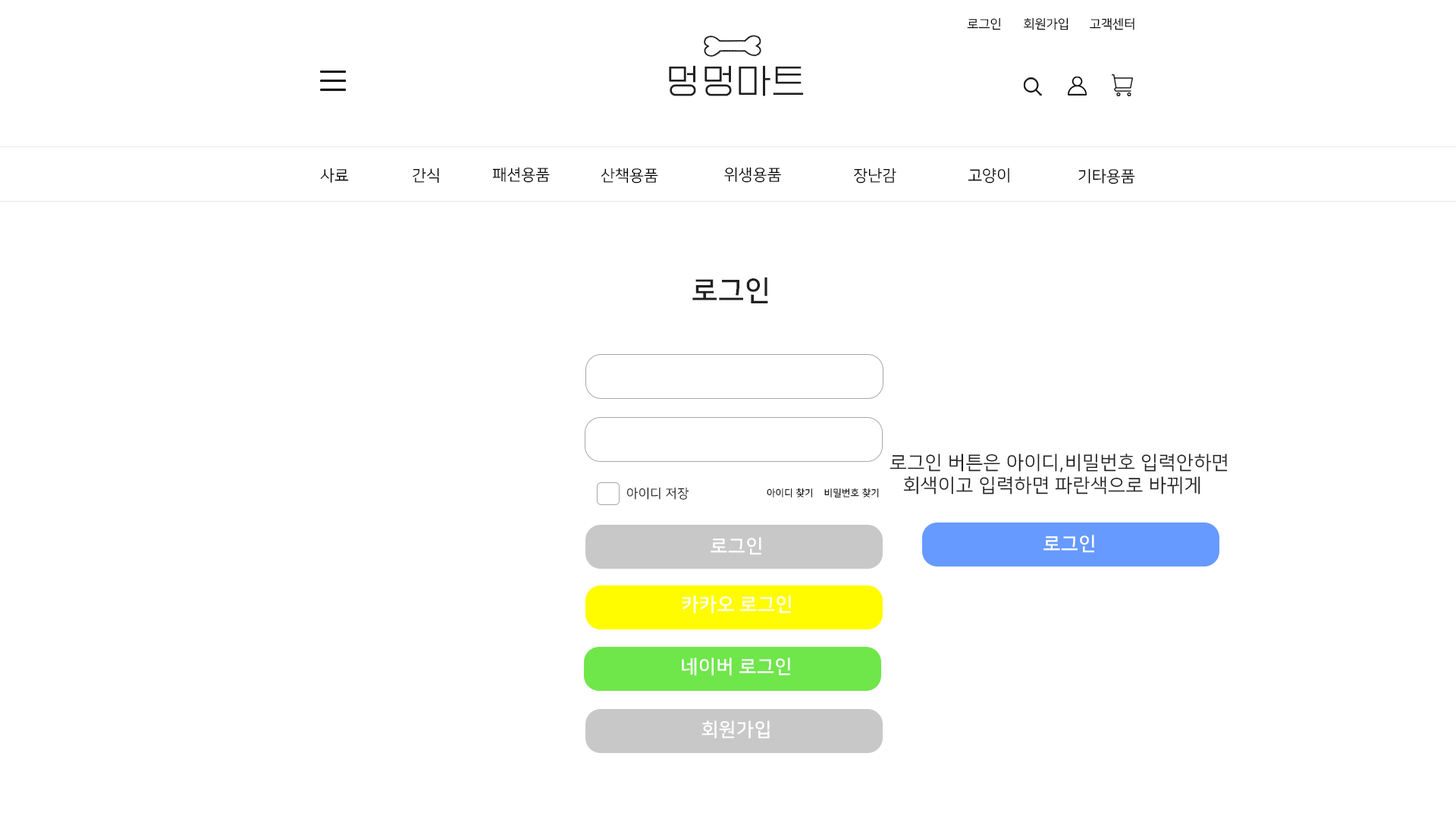
<style>
.page{position:relative;width:1456px;height:819px;background:#ffffff}
.page>*{position:absolute;margin:0}
.t1{font:12.6px "NanumSquareR";color:#000000}
.t2{font:34.8px "EF_watermelonSalad";letter-spacing:0.025em;color:#202020}
.t3{font:15.8px "NanumSquareR";color:#000000}
.t4{font:28.4px "NanumSquareB";letter-spacing:0.025em;color:#202020}
.t5{font:19px "NanumSquareR";letter-spacing:0.025em;color:#202020}
.t6{font:12.6px "NanumSquareR";letter-spacing:0.025em;color:#202020}
.t7{font:9.5px "NanumSquareR";letter-spacing:0.025em;color:#000000}
.t8{font:9.5px "NanumSquareR";letter-spacing:0.025em}
.t9{font:19px "NanumSquareB";letter-spacing:0.025em;color:#ffffff}
</style>
<div class="page">
<p class="t1" style="left:967px;top:17px;width:34px;height:13px">로그인</p>
<p class="t1" style="left:1024px;top:17px;width:44px;height:13px">회원가입</p>
<p class="t1" style="left:1090px;top:17px;width:44px;height:13px">고객센터</p>
<p class="t2" style="left:669px;top:65px;width:134px;height:31px">멍멍마트</p>
<p class="t3" style="left:320px;top:168px;width:29px;height:15px">사료</p>
<p class="t3" style="left:413px;top:168px;width:26px;height:16px">간식</p>
<p class="t3" style="left:492px;top:167px;width:58px;height:16px">패션용품</p>
<p class="t3" style="left:601px;top:168px;width:57px;height:16px">산책용품</p>
<p class="t3" style="left:724px;top:167px;width:57px;height:16px">위생용품</p>
<p class="t3" style="left:854px;top:168px;width:42px;height:16px">장난감</p>
<p class="t3" style="left:968px;top:168px;width:41px;height:16px">고양이</p>
<p class="t3" style="left:1078px;top:168px;width:57px;height:16px">기타용품</p>
<p class="t4" style="left:692px;top:277px;width:76px;height:26px">로그인</p>
<p class="t5" style="left:890px;top:453px;width:338px;height:41px;text-align:center">로그인 버튼은 아이디,비밀번호 입력안하면 <br>회색이고 입력하면 파란색으로 바뀌게</p>
<p class="t6" style="left:626px;top:487px;width:63px;height:13px">아이디 저장</p>
<p class="t7" style="left:767px;top:488px;width:45px;height:9px">아이디 찾기</p>
<p class="t8" style="left:824px;top:488px;width:55px;height:9px">비밀번호 찾기</p>
<p class="t9" style="left:711px;top:537px;width:50px;height:18px">로그인</p>
<p class="t9" style="left:1043px;top:535px;width:51px;height:18px">로그인</p>
<p class="t9" style="left:682px;top:595px;width:109px;height:18px">카카오 로그인</p>
<p class="t9" style="left:682px;top:657px;width:108px;height:19px">네이버 로그인</p>
<p class="t9" style="left:701px;top:720px;width:69px;height:19px">회원가입</p>
</div>
